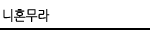
<style>
.page{position:relative;width:150px;height:30px;background:#ffffff}
.page>*{position:absolute;margin:0}
.t1{font:14px "NanumGothic";color:#000000;scale:0.9 1}
</style>
<div class="page">
<p class="t1" style="left:3px;top:9px;width:47px;height:13px">니혼무라</p>
</div>
